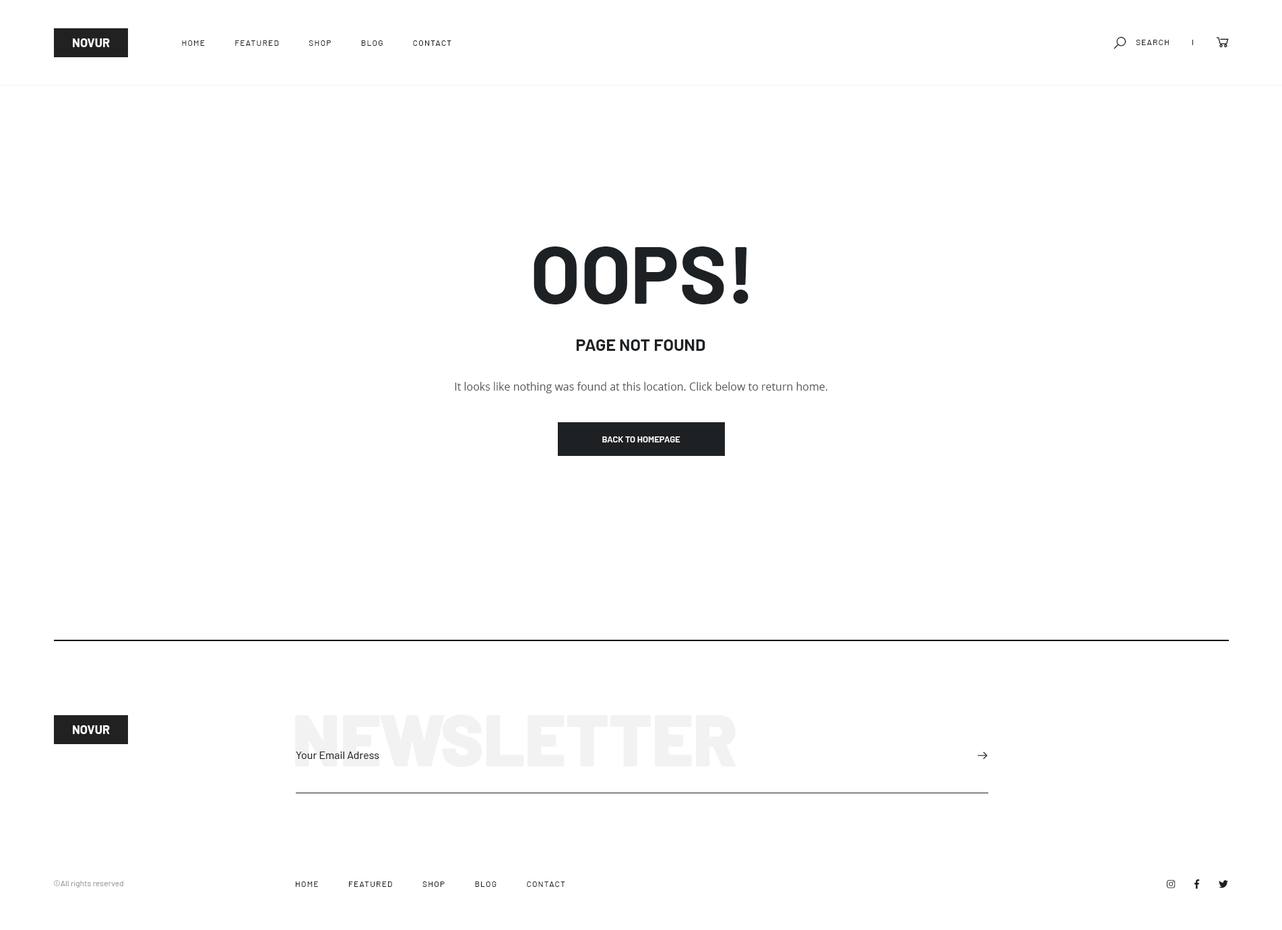
<style>
.page{position:relative;width:1282px;height:930px;background:#ffffff}
.page>*{position:absolute;margin:0}
.t1{font:12.1px "Barlow-Bold";color:#fefefe;text-transform:uppercase}
.t2{font:8.1px "Barlow-Regular";letter-spacing:0.1em;color:#1e2124;text-transform:uppercase}
.t3{font:80.8px "Barlow-Bold";color:#1e2124;text-transform:uppercase}
.t4{font:16.8px "Barlow-Bold";color:#1e2124;text-transform:uppercase}
.t5{font:10.8px "OpenSans";color:#535455}
.t6{font:8.8px "Barlow-SemiBold";color:#ffffff;text-transform:uppercase}
.t7{font:72.1px "Barlow-Black";color:#f2f2f2}
.t8{font:10.8px "Barlow-Regular";color:#1e2124}
.t9{font:8.1px "Barlow-Regular";color:#9e9d9d}
</style>
<div class="page">
<p class="t1" style="left:73px;top:38px;width:37px;height:9px">novur</p>
<p class="t2" style="left:182px;top:40px;width:269px;height:6px">Home            Featured            Shop            Blog            Contact</p>
<p class="t2" style="left:1136px;top:40px;width:33px;height:5px">Search</p>
<p class="t3" style="left:533px;top:247px;width:215px;height:57px">Oops!</p>
<p class="t4" style="left:576px;top:339px;width:129px;height:12px">Page Not Found</p>
<p class="t5" style="left:455px;top:382px;width:372px;height:11px">It looks like nothing was found at this location. Click below to return home.</p>
<p class="t6" style="left:602px;top:436px;width:78px;height:7px">Back to Homepage</p>
<p class="t1" style="left:73px;top:725px;width:37px;height:9px">Novur</p>
<p class="t7" style="left:295px;top:715px;width:441px;height:52px">NEWSLETTER</p>
<p class="t8" style="left:296px;top:752px;width:83px;height:7px">Your Email Adress</p>
<p class="t9" style="left:54px;top:880px;width:69px;height:8px">©All rights reserved</p>
<p class="t2" style="left:296px;top:882px;width:269px;height:5px">Home            Featured            Shop            Blog            Contact</p>
</div>
